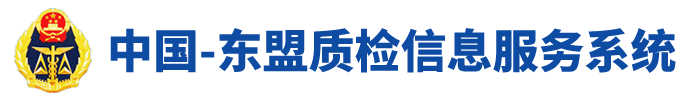
<style>
.page{position:relative;width:680px;height:100px;background:#ffffff}
.page>*{position:absolute;margin:0}
.t1{font:46px "SourceHanSansCN-Heavy";color:#0e4ca4}
</style>
<div class="page">
<p class="t1" style="left:110px;top:28px;width:566px;height:45px">中国-东盟质检信息服务系统</p>
</div>
